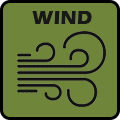
<style>
.page{position:relative;width:120px;height:120px;background:#6f853a}
.page>*{position:absolute;margin:0}
.t1{font:20px "ErasITC-Bold";color:#181818}
</style>
<div class="page">
<p class="t1" style="left:32px;top:11px;width:60px;height:13px">WIND</p>
</div>
